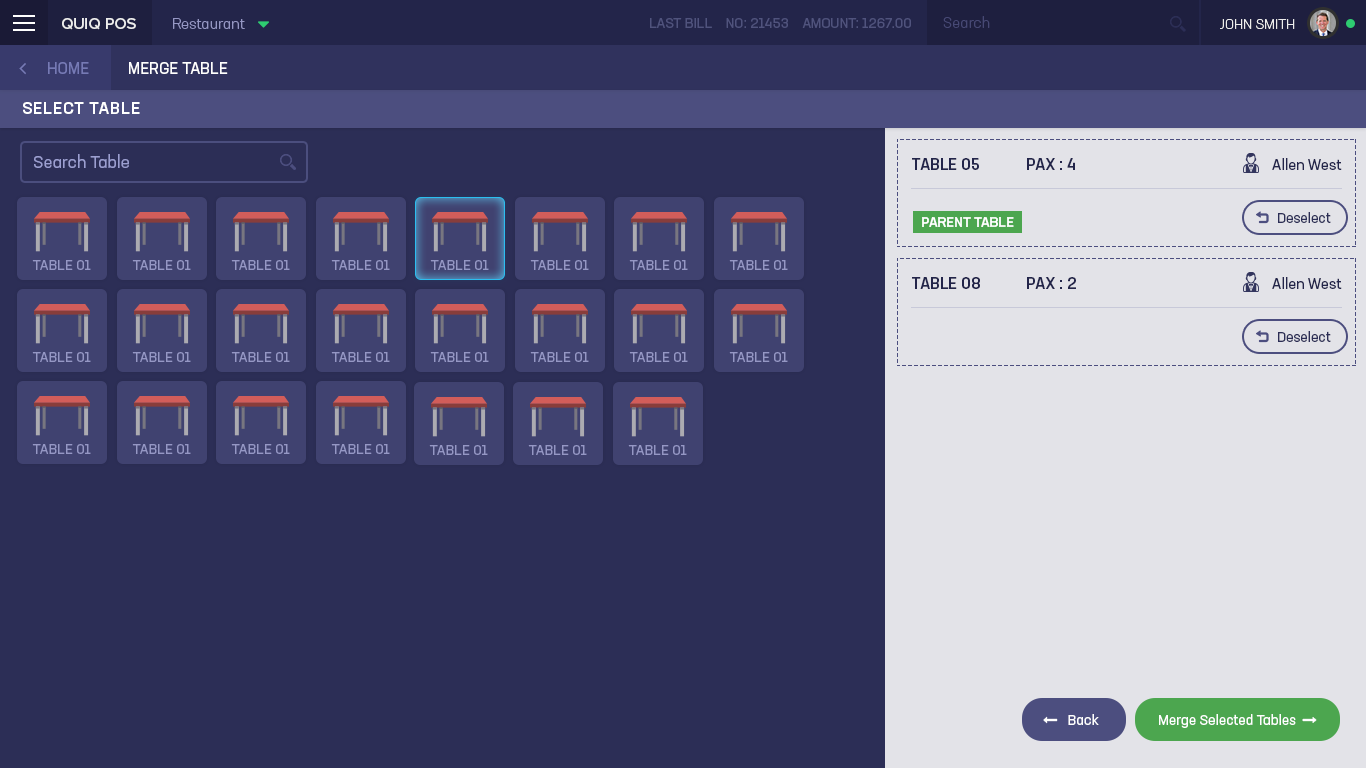
<style>
.page{position:relative;width:1366px;height:768px;background:#2c2e56}
.page>*{position:absolute;margin:0}
.t1{font:15px "NeusaNextStd-Light";color:#474975}
.t2{font:16px "ProximaNova-Medium";color:#ededed}
.t3{font:15px "NeusaNextStd-Light";color:#9597c4}
.t4{font:14px "NeusaNextStd-Regular";color:#50537d;text-transform:uppercase}
.t5{font:14px "NeusaNextStd-Light";color:#ededed;text-transform:uppercase}
.t6{font:16px "NeusaNextStd-Regular";color:#767ab5;text-transform:uppercase}
.t7{font:16px "NeusaNextStd-Regular";color:#ffffff;text-transform:uppercase}
.t8{font:17px "NeusaNextStd-Medium";letter-spacing:0.04em;color:#ffffff;text-transform:uppercase}
.t9{font:17px "NeusaNextStd-Regular";color:#9c9fd1}
.t10{font:16px "NeusaNextStd-Medium";color:#23254a;text-transform:uppercase}
.t11{font:15px "NeusaNextStd-Regular";color:#23254a}
.t12{font:14px "NeusaNextStd-Medium";color:#ffffff;text-transform:uppercase}
.t13{font:14px "NeusaNextStd-Regular";color:#2c2e56}
</style>
<div class="page">
<p class="t1" style="left:943px;top:16px;width:47px;height:12px">Search</p>
<p class="t2" style="left:62px;top:18px;width:74px;height:12px">QUIQ POS</p>
<p class="t3" style="left:173px;top:18px;width:72px;height:11px">Restaurant</p>
<p class="t4" style="left:650px;top:18px;width:261px;height:10px">Last Bill    NO: 21453    Amount: 1267.00</p>
<p class="t5" style="left:1220px;top:19px;width:75px;height:10px">John Smith</p>
<p class="t6" style="left:48px;top:62px;width:41px;height:12px">Home</p>
<p class="t7" style="left:129px;top:62px;width:99px;height:12px">Merge Table</p>
<p class="t8" style="left:23px;top:102px;width:117px;height:12px">Select Table</p>
<p class="t9" style="left:34px;top:154px;width:95px;height:14px">Search Table</p>
<p class="t10" style="left:912px;top:158px;width:67px;height:12px">Table 05</p>
<p class="t10" style="left:1027px;top:158px;width:48px;height:12px">PAX : 4</p>
<p class="t11" style="left:1272px;top:158px;width:70px;height:12px">Allen West</p>
<p class="t12" style="left:922px;top:217px;width:92px;height:10px">Parent Table</p>
<p class="t13" style="left:1278px;top:212px;width:53px;height:11px">Deselect</p>
<p class="t10" style="left:912px;top:277px;width:68px;height:12px">Table 08</p>
<p class="t10" style="left:1027px;top:277px;width:49px;height:12px">PAX : 2</p>
<p class="t11" style="left:1272px;top:277px;width:70px;height:12px">Allen West</p>
<p class="t13" style="left:1278px;top:331px;width:53px;height:11px">Deselect</p>
</div>
